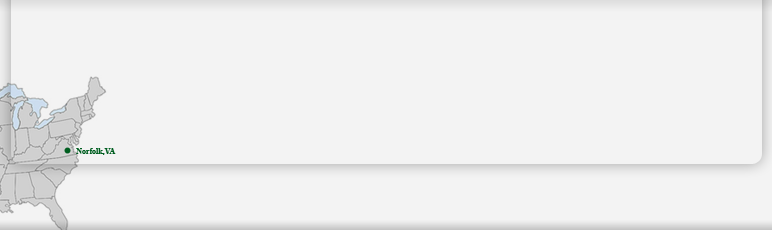
<style>
.page{position:relative;width:772px;height:230px;background:#f3f3f3}
.page>*{position:absolute;margin:0}
.t1{font:8px "TimesNewRomanPS-BoldMT";color:#005e20}
</style>
<div class="page">
<p class="t1" style="left:76px;top:148px;width:40px;height:7px">Norfolk,VA</p>
</div>
